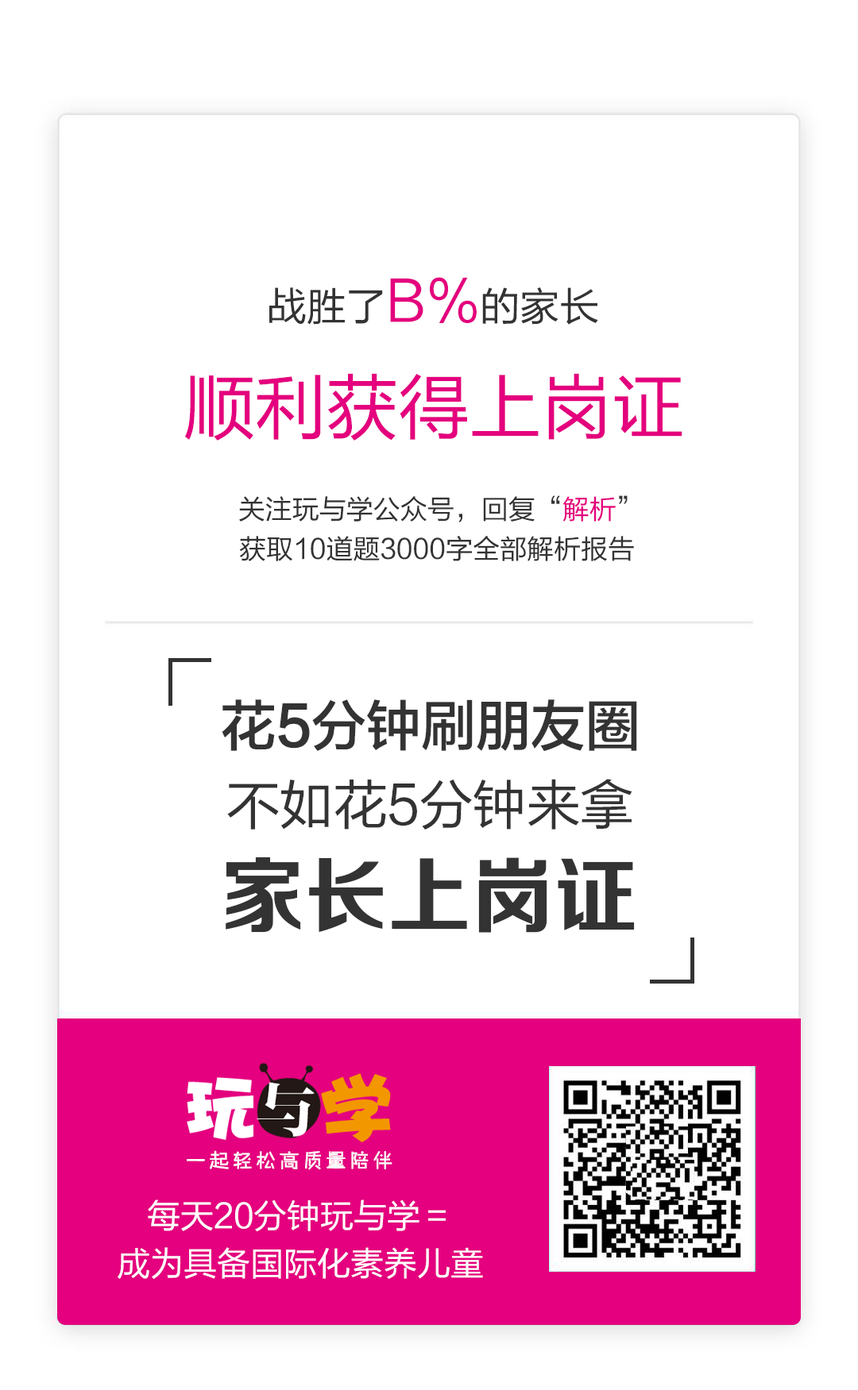
<style>
.page{position:relative;width:858px;height:1390px;background:#ffffff}
.page>*{position:absolute;margin:0}
.t1{font:39.7px "FZLTHK--GBK1-0";color:#333333}
.t2{font:55.6px "FZLTHK--GBK1-0";color:#e4007e}
.t3{font:71.5px "FZLTHK--GBK1-0";color:#e4007e}
.t4{font:27px/39.7px "FZLTHK--GBK1-0";color:#333333}
.t5{font:27px/39.7px "FZLTHK--GBK1-0";color:#e4007e}
.t6{font:54.8px "FZLTZHK--GBK1-0";color:#333333}
.t7{font:53.6px "FZLTHK--GBK1-0";color:#333333}
.t8{font:83.4px "FZZCHJW--GB1-0";color:#333333}
.t9{font:19.1px "FZZHYJW--GB1-0";letter-spacing:0.2em;color:#ffffff;font-weight:bold}
.t10{font:33.4px/47.6px "FZLTHK--GBK1-0";color:#ffffff}
</style>
<div class="page">
<p class="t1" style="left:269px;top:277px;width:329px;height:48px">战胜了<span class="t2">B%</span>的家长</p>
<p class="t3" style="left:185px;top:373px;width:497px;height:68px">顺利获得上岗证</p>
<p class="t4" style="left:239px;top:496px;width:395px;height:65px;text-align:center">关注玩与学公众号，回复“<span class="t5">解析</span>”<br>获取10道题3000字全部解析报告</p>
<p class="t6" style="left:222px;top:700px;width:415px;height:52px">花5分钟刷朋友圈</p>
<p class="t7" style="left:227px;top:779px;width:405px;height:51px">不如花5分钟来拿</p>
<p class="t8" style="left:226px;top:857px;width:408px;height:76px">家长上岗证</p>
<p class="t9" style="left:187px;top:1151px;width:205px;height:19px">一起轻松高质量陪伴</p>
<p class="t10" style="left:118px;top:1200px;width:365px;height:79px;text-align:center">每天20分钟玩与学＝<br>成为具备国际化素养儿童</p>
</div>
